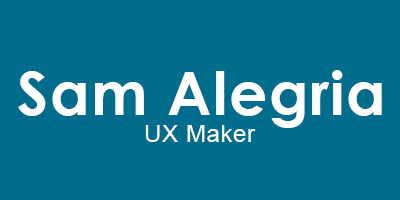
<style>
.page{position:relative;width:400px;height:200px;background:#006d8d}
.page>*{position:absolute;margin:0}
.t1{font:60px "CenturyGothic-Bold";letter-spacing:0.025em;color:#ffffff}
.t2{font:24px "ArialMT";letter-spacing:0.025em;color:#fdfdfd}
</style>
<div class="page">
<p class="t1" style="left:18px;top:70px;width:364px;height:58px">Sam Alegria</p>
<p class="t2" style="left:145px;top:125px;width:111px;height:17px">UX Maker</p>
</div>
